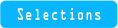
<style>
.page{position:relative;width:118px;height:28px;background:#07b6fe}
.page>*{position:absolute;margin:0}
.t1{font:15px "OCRAStd";letter-spacing:0.1em;color:#ffffff;scale:0.7 1}
</style>
<div class="page">
<p class="t1" style="left:17px;top:8px;width:84px;height:12px">Selections</p>
</div>
